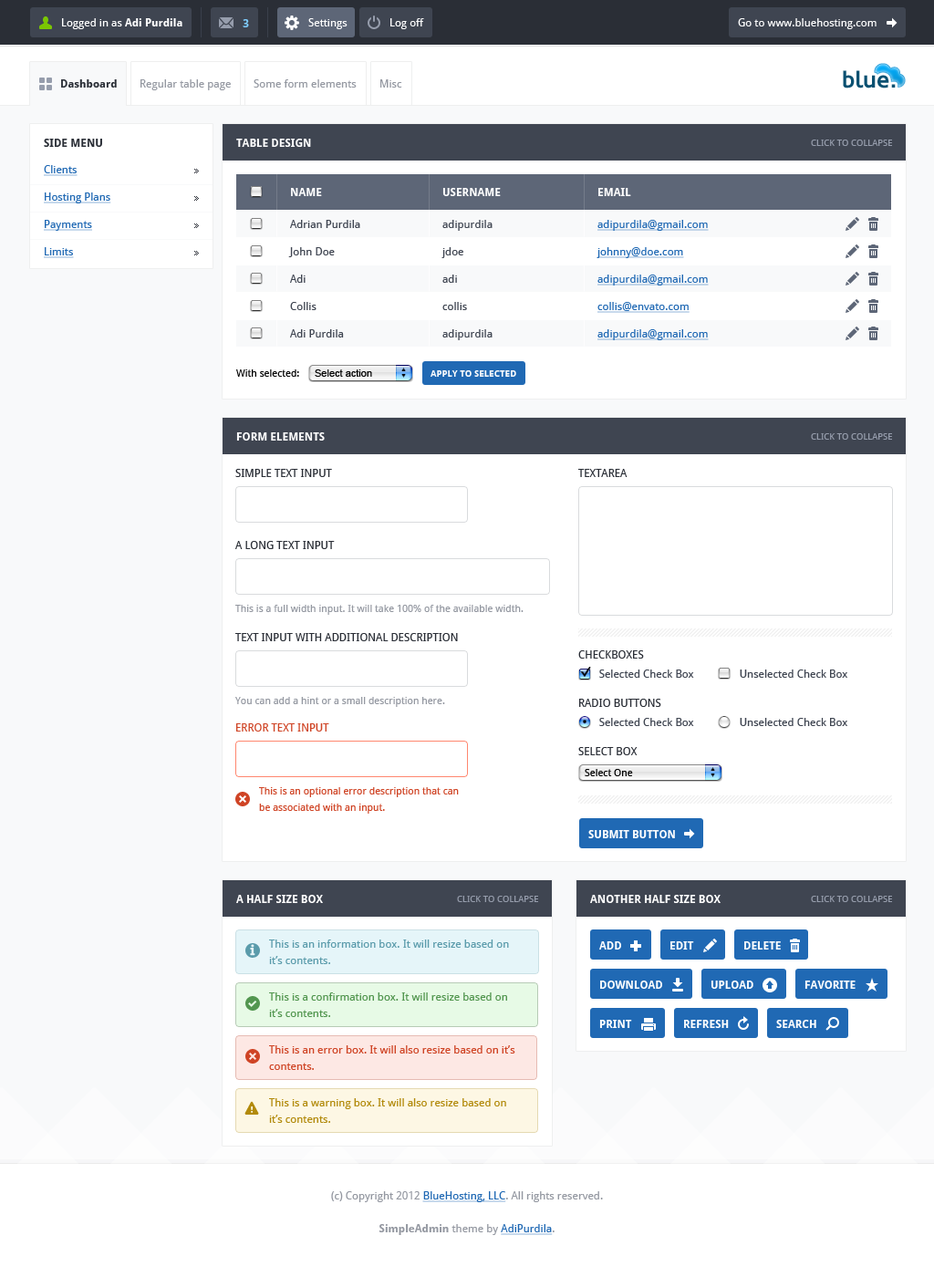
<style>
.page{position:relative;width:934px;height:1277px;background:#ffffff}
.page>*{position:absolute;margin:0}
.t1{font:10.9px "DroidSans";color:#ffffff}
.t2{font:10.9px "DroidSans-Bold";color:#ffffff}
.t3{font:10.9px "DroidSans-Bold";color:#7fcdff}
.t4{font:23.2px "Oblik-Bold";color:#085071}
.t5{font:10.9px "DroidSans-Bold";color:#2a2e36}
.t6{font:10.9px "DroidSans";color:#9498a1}
.t7{font:10.9px "DroidSans-Bold";color:#2a2e36;text-transform:uppercase}
.t8{font:10.9px "DroidSans-Bold";color:#ffffff;text-transform:uppercase}
.t9{font:9.1px "DroidSans";color:#969dac;text-transform:uppercase}
.t10{font:10.9px/27.4px "DroidSans";color:#2069b4;text-decoration:underline}
.t11{font:10.9px "DroidSans";color:#3f4551}
.t12{font:10.9px "DroidSans";color:#2069b4;text-decoration:underline}
.t13{font:10px "DroidSans";color:#000000}
.t14{font:10px "ArialMT";color:#000000}
.t15{font:9.1px "DroidSans-Bold";color:#ffffff;text-transform:uppercase}
.t16{font:10.9px "DroidSans";color:#2a2e36;text-transform:uppercase}
.t17{font:10px "DroidSans";color:#9498a1}
.t18{font:10.9px "DroidSans";color:#cf4425;text-transform:uppercase}
.t19{font:10px/16.4px "DroidSans";color:#cf4425}
.t20{font:10.9px/16.4px "DroidSans";color:#5a9bab}
.t21{font:10.9px/16.4px "DroidSans";color:#52964f}
.t22{font:10.9px/16.4px "DroidSans";color:#cf4425}
.t23{font:10.9px/16.4px "DroidSans";color:#b28a0b}
.t24{font:10.9px/16.4px "DroidSans";color:#9498a1}
.t25{font:10.9px/16.4px "DroidSans";color:#2069b4;text-decoration:underline}
.t26{font:10.9px/16.4px "DroidSans-Bold";color:#9498a1}
</style>
<div class="page">
<p class="t1" style="left:62px;top:18px;width:120px;height:11px">Logged in as <span class="t2">Adi Purdila</span></p>
<p class="t3" style="left:243px;top:19px;width:6px;height:8px">3</p>
<p class="t1" style="left:308px;top:18px;width:39px;height:11px">Settings</p>
<p class="t1" style="left:390px;top:18px;width:34px;height:11px">Log off</p>
<p class="t1" style="left:738px;top:18px;width:138px;height:11px">Go to www.bluehosting.com</p>
<p class="t4" style="left:843px;top:70px;width:53px;height:18px">blue.</p>
<p class="t5" style="left:61px;top:79px;width:56px;height:9px">Dashboard</p>
<p class="t6" style="left:140px;top:79px;width:91px;height:11px">Regular table page</p>
<p class="t6" style="left:254px;top:79px;width:103px;height:9px">Some form elements</p>
<p class="t6" style="left:380px;top:79px;width:22px;height:9px">Misc</p>
<p class="t7" style="left:44px;top:139px;width:58px;height:8px">Side menu</p>
<p class="t8" style="left:236px;top:139px;width:75px;height:8px">table design</p>
<p class="t9" style="left:811px;top:140px;width:81px;height:6px">click to collapse</p>
<p class="t10" style="left:44px;top:165px;width:67px;height:93px">Clients<br>Hosting Plans<br>Payments<br>Limits</p>
<p class="t8" style="left:291px;top:188px;width:31px;height:8px">Name</p>
<p class="t8" style="left:442px;top:188px;width:59px;height:8px">userName</p>
<p class="t8" style="left:598px;top:188px;width:33px;height:8px">email</p>
<p class="t11" style="left:290px;top:220px;width:70px;height:8px">Adrian Purdila</p>
<p class="t11" style="left:442px;top:220px;width:50px;height:11px">adipurdila</p>
<p class="t12" style="left:597px;top:220px;width:112px;height:11px">adipurdila@gmail.com</p>
<p class="t11" style="left:288px;top:247px;width:47px;height:10px">John Doe</p>
<p class="t11" style="left:441px;top:247px;width:22px;height:11px">jdoe</p>
<p class="t12" style="left:596px;top:247px;width:88px;height:11px">johnny@doe.com</p>
<p class="t11" style="left:290px;top:275px;width:16px;height:8px">Adi</p>
<p class="t11" style="left:442px;top:275px;width:15px;height:8px">adi</p>
<p class="t12" style="left:597px;top:275px;width:112px;height:10px">adipurdila@gmail.com</p>
<p class="t11" style="left:290px;top:302px;width:26px;height:8px">Collis</p>
<p class="t11" style="left:442px;top:302px;width:25px;height:8px">collis</p>
<p class="t12" style="left:597px;top:302px;width:92px;height:11px">collis@envato.com</p>
<p class="t11" style="left:290px;top:329px;width:54px;height:8px">Adi Purdila</p>
<p class="t11" style="left:442px;top:329px;width:50px;height:11px">adipurdila</p>
<p class="t12" style="left:597px;top:329px;width:112px;height:11px">adipurdila@gmail.com</p>
<p class="t13" style="left:236px;top:369px;width:63px;height:8px">With selected:</p>
<p class="t14" style="left:315px;top:369px;width:57px;height:8px">Select action</p>
<p class="t15" style="left:430px;top:370px;width:86px;height:7px">apply to selected</p>
<p class="t8" style="left:236px;top:432px;width:89px;height:9px">form elements</p>
<p class="t9" style="left:811px;top:433px;width:81px;height:7px">click to collapse</p>
<p class="t16" style="left:235px;top:469px;width:97px;height:8px">simple text input</p>
<p class="t16" style="left:578px;top:469px;width:49px;height:8px">textarea</p>
<p class="t16" style="left:235px;top:541px;width:100px;height:8px">a long text input</p>
<p class="t17" style="left:235px;top:605px;width:288px;height:10px">This is a full width input. It will take 100% of the available width.</p>
<p class="t16" style="left:235px;top:633px;width:223px;height:8px">text input with additional description</p>
<p class="t16" style="left:578px;top:650px;width:66px;height:8px">checkboxes</p>
<p class="t11" style="left:599px;top:669px;width:95px;height:9px">Selected Check Box</p>
<p class="t11" style="left:740px;top:669px;width:107px;height:9px">Unselected Check Box</p>
<p class="t17" style="left:235px;top:697px;width:210px;height:10px">You can add a hint or a small description here.</p>
<p class="t16" style="left:579px;top:699px;width:82px;height:8px">radio buttons</p>
<p class="t18" style="left:236px;top:723px;width:93px;height:8px">error text input</p>
<p class="t11" style="left:599px;top:718px;width:95px;height:8px">Selected Check Box</p>
<p class="t11" style="left:740px;top:718px;width:107px;height:8px">Unselected Check Box</p>
<p class="t16" style="left:578px;top:747px;width:59px;height:8px">select box</p>
<p class="t13" style="left:585px;top:769px;width:48px;height:7px">Select One</p>
<p class="t19" style="left:259px;top:787px;width:200px;height:27px">This is an optional error description that can <br>be associated with an input.</p>
<p class="t8" style="left:588px;top:830px;width:87px;height:8px">submit button</p>
<p class="t8" style="left:236px;top:895px;width:87px;height:8px">a half size box</p>
<p class="t9" style="left:457px;top:896px;width:81px;height:6px">click to collapse</p>
<p class="t8" style="left:590px;top:895px;width:130px;height:8px">another half size box</p>
<p class="t9" style="left:811px;top:896px;width:81px;height:6px">click to collapse</p>
<p class="t20" style="left:269px;top:939px;width:240px;height:25px">This is an information box. It will resize based on <br>it’s contents.</p>
<p class="t8" style="left:599px;top:941px;width:22px;height:8px">add</p>
<p class="t8" style="left:670px;top:941px;width:24px;height:8px">edit</p>
<p class="t8" style="left:744px;top:941px;width:37px;height:8px">delete</p>
<p class="t8" style="left:600px;top:980px;width:62px;height:9px">download</p>
<p class="t8" style="left:710px;top:980px;width:43px;height:9px">upload</p>
<p class="t8" style="left:804px;top:980px;width:51px;height:9px">favorite</p>
<p class="t21" style="left:269px;top:992px;width:238px;height:25px">This is a confirmation box. It will resize based on <br>it’s contents.</p>
<p class="t8" style="left:599px;top:1020px;width:33px;height:8px">print</p>
<p class="t8" style="left:684px;top:1020px;width:45px;height:8px">refresh</p>
<p class="t8" style="left:776px;top:1020px;width:40px;height:8px">search</p>
<p class="t22" style="left:269px;top:1045px;width:246px;height:25px">This is an error box. It will also resize based on it’s <br>contents.</p>
<p class="t23" style="left:269px;top:1098px;width:237px;height:25px">This is a warning box. It will also resize based on <br>it’s contents.</p>
<p class="t24" style="left:331px;top:1191px;width:272px;height:44px;text-align:center">(c) Copyright 2012 <span class="t25">BlueHosting, LLC</span>. All rights reserved.<br><br><span class="t26">SimpleAdmin</span> theme by <span class="t25">AdiPurdila</span>.</p>
</div>
